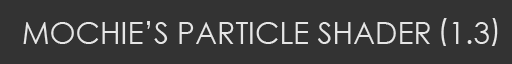
<style>
.page{position:relative;width:512px;height:64px;background:#333333}
.page>*{position:absolute;margin:0}
.t1{font:30px "CenturyGothic";color:#e6e6e6}
</style>
<div class="page">
<p class="t1" style="left:23px;top:21px;width:466px;height:23px">MOCHIE’S PARTICLE SHADER  1.3</p>
</div>
